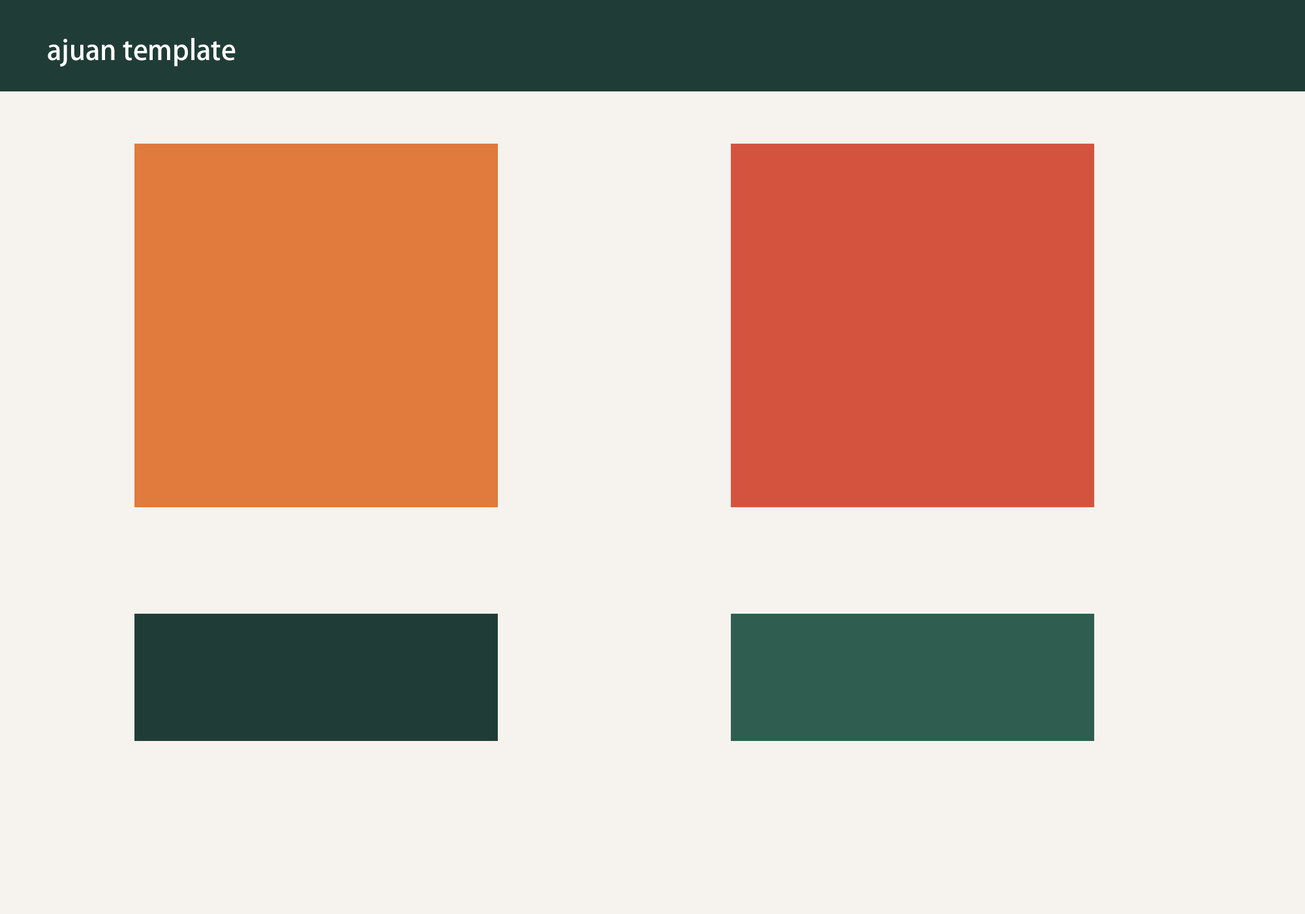
<style>
.page{position:relative;width:1305px;height:914px;background:#f6f3ee}
.page>*{position:absolute;margin:0}
.t1{font:27.4px "AdobeHeitiStd-Regular";color:#ffffff}
</style>
<div class="page">
<p class="t1" style="left:48px;top:38px;width:188px;height:29px">ajuan template</p>
</div>
